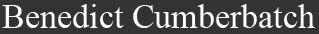
<style>
.page{position:relative;width:319px;height:34px;background:#333333}
.page>*{position:absolute;margin:0}
.t1{font:34px "TimesNewRomanPSMT";color:#ffffff}
</style>
<div class="page">
<p class="t1" style="left:2px;top:4px;width:313px;height:24px">Benedict Cumberbatch</p>
</div>
